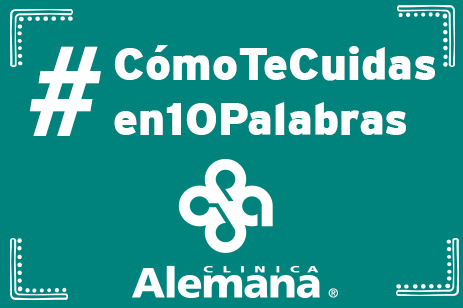
<style>
.page{position:relative;width:463px;height:308px;background:#00837c}
.page>*{position:absolute;margin:0}
.t1{font:137.5px "MyriadPro-BoldIt";color:#ffffff}
.t2{font:46.2px "Interstate-Black";color:#ffffff}
</style>
<div class="page">
<p class="t1" style="left:30px;top:46px;width:71px;height:90px">#</p>
<p class="t2" style="left:114px;top:45px;width:321px;height:90px">CómoTeCuidas<br>en10Palabras</p>
</div>
